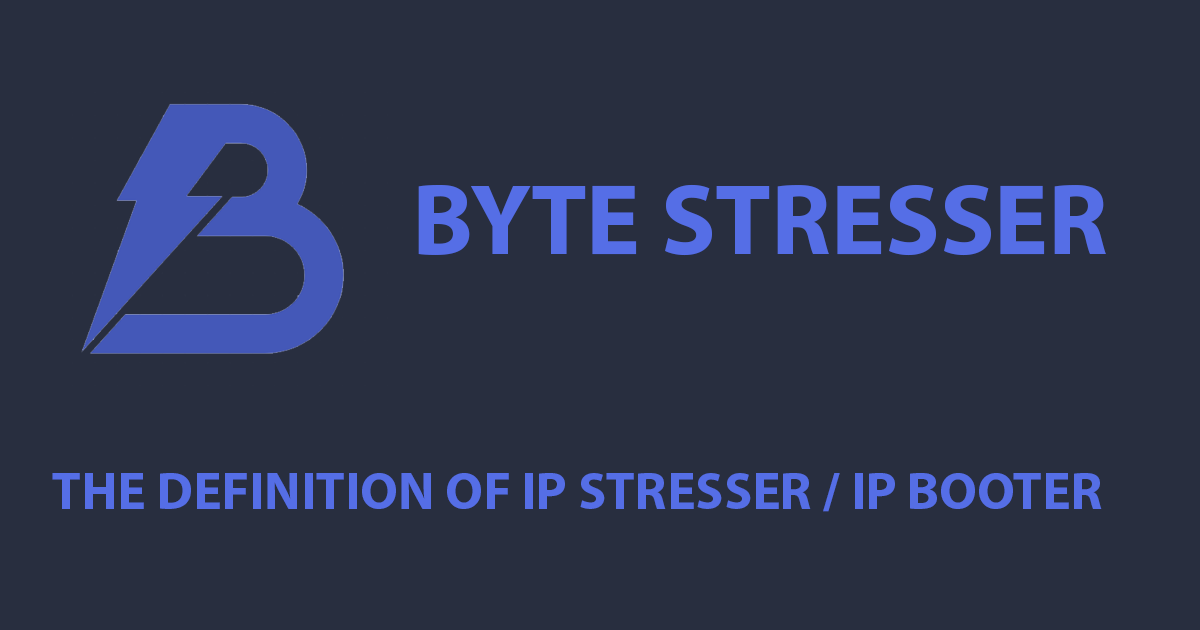
<style>
.page{position:relative;width:1200px;height:630px;background:#282e3f}
.page>*{position:absolute;margin:0}
.t1{font:101.2px "MyriadPro-Bold";color:#556ee6}
.t2{font:52.9px "MyriadPro-Bold";color:#556ee6}
</style>
<div class="page">
<p class="t1" style="left:418px;top:184px;width:688px;height:72px">BYTE STRESSER</p>
<p class="t2" style="left:52px;top:473px;width:1050px;height:39px">THE DEFINITION OF IP STRESSER / IP BOOTER</p>
</div>
